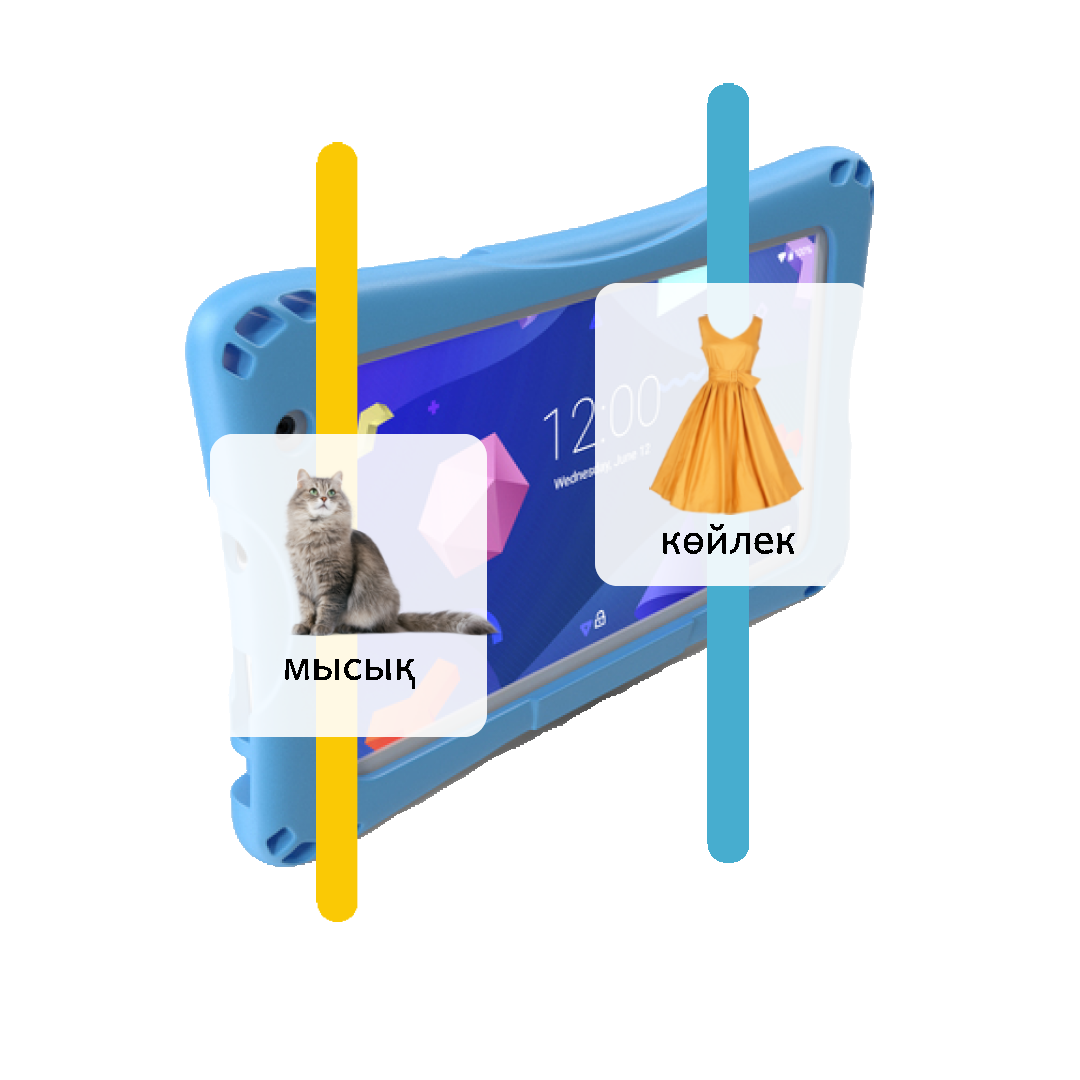
<style>
.page{position:relative;width:1080px;height:1080px;background:#ffffff}
.page>*{position:absolute;margin:0}
.t1{font:40.9px "Andika";color:#000000}
</style>
<div class="page">
<p class="t1" style="left:663px;top:524px;width:132px;height:31px">көйлек</p>
<p class="t1" style="left:285px;top:658px;width:131px;height:31px">мысық</p>
</div>
